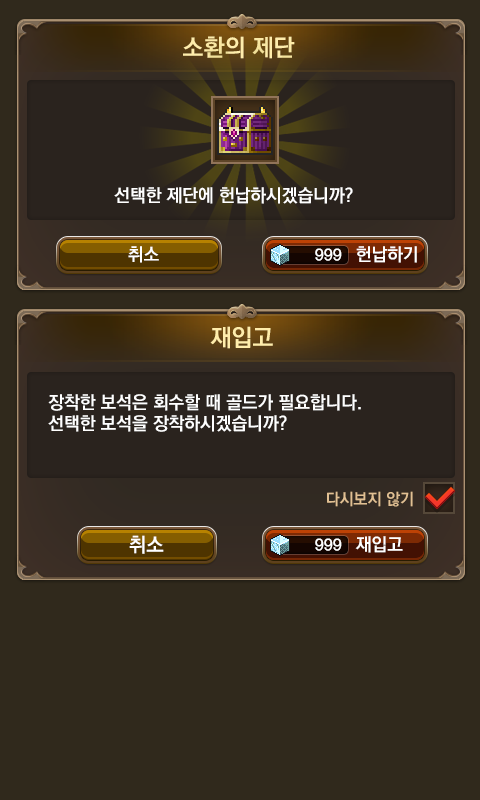
<style>
.page{position:relative;width:480px;height:800px;background:#30291c}
.page>*{position:absolute;margin:0}
.t1{font:24px "KoPubDotumBold";color:#ffedab}
.t2{font:18px "KoPubDotumBold";color:#ffffff}
.t3{font:16px "KoPubDotumBold";color:#ffffff}
.t4{font:16px "KoPubDotumBold";color:#e1c093}
.t5{font:20px "KoPubDotumBold";color:#ffffff}
</style>
<div class="page">
<p class="t1" style="left:183px;top:36px;width:112px;height:23px">소환의 제단</p>
<p class="t2" style="left:114px;top:187px;width:239px;height:17px">선택한 제단에 헌납하시겠습니까?</p>
<p class="t2" style="left:128px;top:246px;width:31px;height:17px">취소</p>
<p class="t2" style="left:356px;top:246px;width:61px;height:17px">헌납하기</p>
<p class="t3" style="left:315px;top:248px;width:27px;height:13px">999</p>
<p class="t1" style="left:210px;top:326px;width:63px;height:23px">재입고</p>
<p class="t2" style="left:48px;top:394px;width:313px;height:38px">장착한 보석은 회수할 때 골드가 필요합니다.<br>선택한 보석을 장착하시겠습니까?</p>
<p class="t4" style="left:327px;top:491px;width:86px;height:16px">다시보지 않기</p>
<p class="t5" style="left:129px;top:535px;width:35px;height:19px">취소</p>
<p class="t3" style="left:315px;top:538px;width:27px;height:13px">999</p>
<p class="t2" style="left:355px;top:536px;width:48px;height:17px">재입고</p>
</div>
